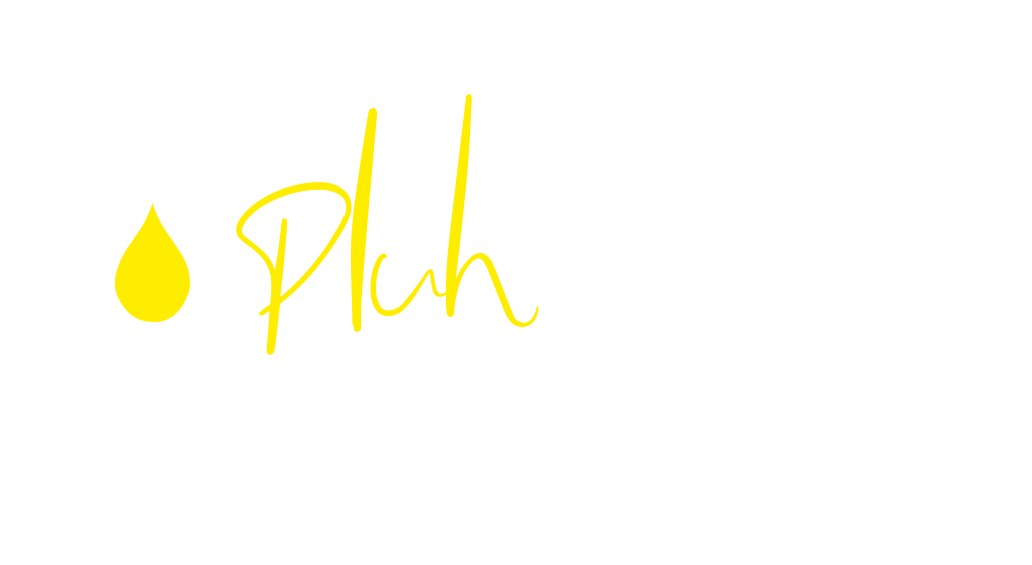
<style>
.page{position:relative;width:1032px;height:565px;background:#ffffff}
.page>*{position:absolute;margin:0}
.t1{font:250px "Pommel-Regular";color:#ffed00}
</style>
<div class="page">
<p class="t1" style="left:236px;top:94px;width:303px;height:261px">Pluh</p>
</div>
